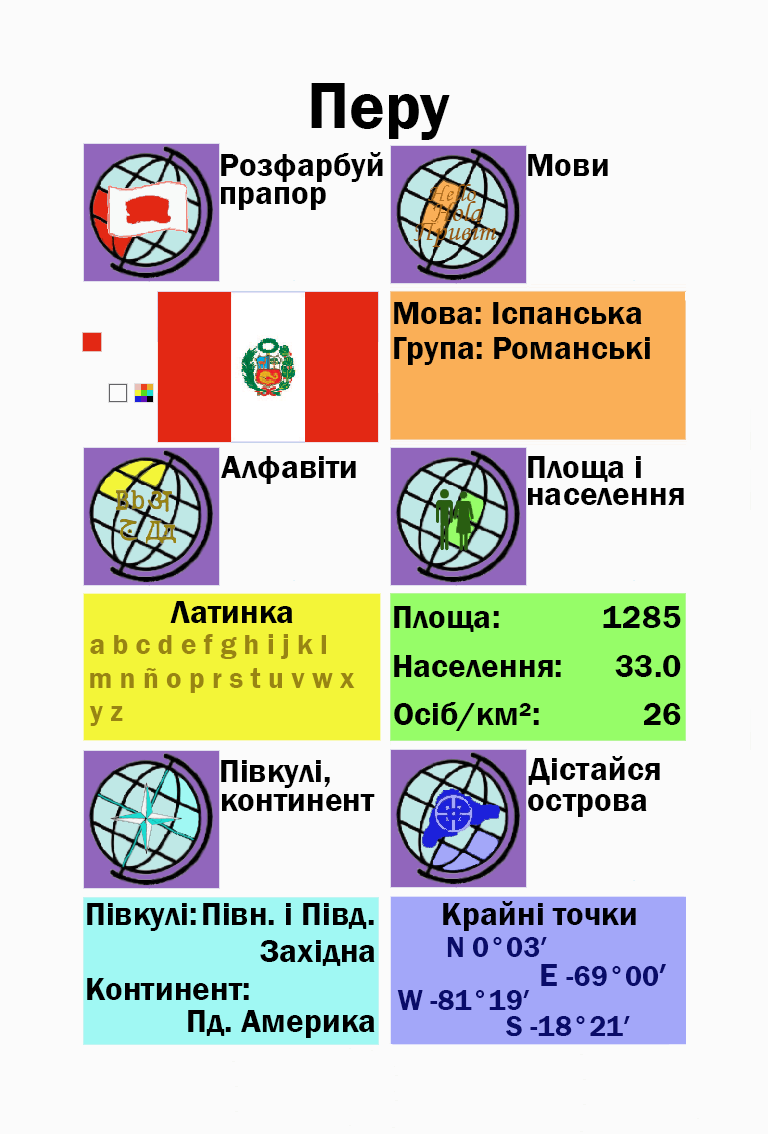
<style>
.page{position:relative;width:768px;height:1134px;background:#fbfbfb}
.page>*{position:absolute;margin:0}
.t1{font:66.7px "FranklinGothic-Demi";color:#000000}
.t2{font:33.3px "FranklinGothic-Demi";color:#000000}
.t3{font:33.3px "FranklinGothic-Demi";color:#000003}
.t4{font:29.2px "FranklinGothic-Demi";color:#988413}
.t5{font:29.2px "FranklinGothic-Demi";color:#090c69}
.t6{font:33.3px "FranklinGothic-Demi";color:#090c69}
</style>
<div class="page">
<p class="t1" style="left:311px;top:83px;width:139px;height:57px">Перу</p>
<p class="t2" style="left:221px;top:152px;width:162px;height:30px">Розфарбуй</p>
<p class="t2" style="left:528px;top:154px;width:80px;height:22px">Мови</p>
<p class="t2" style="left:221px;top:187px;width:105px;height:23px">прапор</p>
<p class="t2" style="left:394px;top:302px;width:248px;height:22px">Мова: Іспанська</p>
<p class="t2" style="left:394px;top:337px;width:256px;height:28px">Група: Романські</p>
<p class="t2" style="left:221px;top:456px;width:135px;height:28px">Алфавіти</p>
<p class="t2" style="left:528px;top:456px;width:113px;height:26px">Площа і</p>
<p class="t2" style="left:528px;top:488px;width:156px;height:17px">населення</p>
<p class="t2" style="left:170px;top:601px;width:123px;height:22px">Латинка</p>
<p class="t2" style="left:394px;top:606px;width:105px;height:26px">Площа:</p>
<p class="t3" style="left:603px;top:606px;width:78px;height:22px">1285</p>
<p class="t4" style="left:90px;top:634px;width:236px;height:25px">a b c d e f g h i j k l</p>
<p class="t2" style="left:394px;top:655px;width:167px;height:22px">Населення:</p>
<p class="t2" style="left:615px;top:655px;width:66px;height:22px">33.0</p>
<p class="t4" style="left:90px;top:668px;width:265px;height:25px">m n ñ o p r s t u v w x</p>
<p class="t2" style="left:394px;top:702px;width:145px;height:29px">Осіб/км²:</p>
<p class="t4" style="left:89px;top:706px;width:34px;height:20px">y z</p>
<p class="t2" style="left:644px;top:703px;width:37px;height:22px">26</p>
<p class="t2" style="left:221px;top:760px;width:109px;height:28px">Півкулі,</p>
<p class="t2" style="left:528px;top:756px;width:132px;height:29px">Дістайся</p>
<p class="t2" style="left:222px;top:794px;width:153px;height:17px">континент</p>
<p class="t2" style="left:528px;top:794px;width:119px;height:23px">острова</p>
<p class="t2" style="left:87px;top:903px;width:109px;height:28px">Півкулі:</p>
<p class="t2" style="left:203px;top:903px;width:171px;height:26px">Півн. і Півд.</p>
<p class="t3" style="left:443px;top:901px;width:193px;height:30px">Крайні точки</p>
<p class="t2" style="left:260px;top:940px;width:115px;height:26px">Західна</p>
<p class="t5" style="left:447px;top:937px;width:100px;height:20px">N 0°03′</p>
<p class="t5" style="left:541px;top:964px;width:125px;height:22px"><span class="t6">E </span>-69°00<span class="t6">′</span></p>
<p class="t2" style="left:87px;top:978px;width:162px;height:22px">Континент:</p>
<p class="t5" style="left:397px;top:990px;width:133px;height:20px">W -81°19′</p>
<p class="t2" style="left:188px;top:1010px;width:187px;height:28px">Пд. Америка</p>
<p class="t5" style="left:506px;top:1016px;width:124px;height:21px">S -18°21′</p>
</div>
